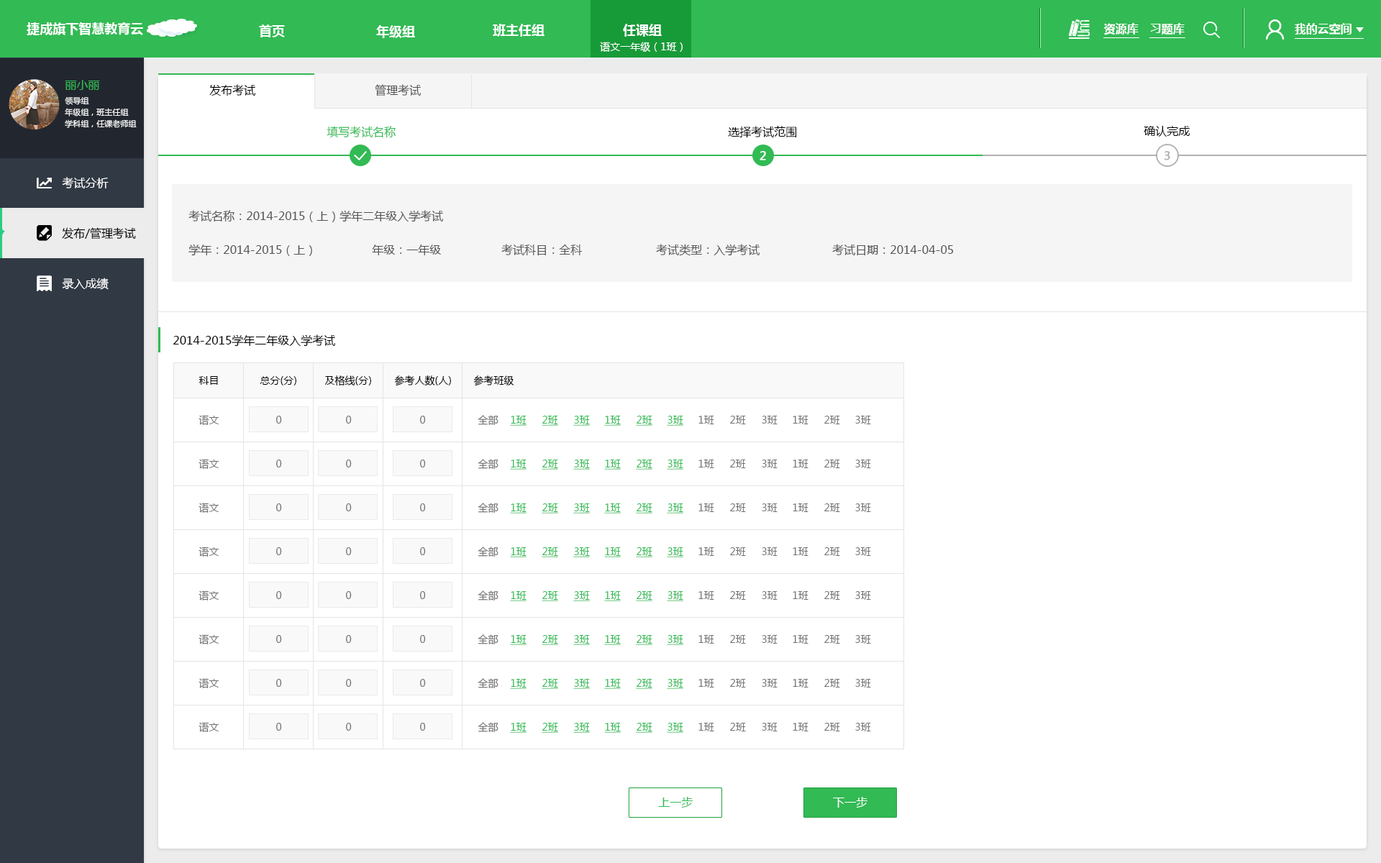
<style>
.page{position:relative;width:1381px;height:863px;background:#ffffff}
.page>*{position:absolute;margin:0}
.t1{font:12.9px "MicrosoftYaHei-Bold";color:#ffffff}
.t2{font:11.5px "MicrosoftYaHei-Bold";color:#ffffff}
.t3{font:10.1px "MicrosoftYaHei";color:#ffffff}
.t4{font:11.5px "MicrosoftYaHei";color:#32ba54}
.t5{font:11.5px "MicrosoftYaHei";color:#000000}
.t6{font:11.5px "MicrosoftYaHei";color:#545454}
.t7{font:7.9px/11.5px "MicrosoftYaHei";color:#ffffff}
.t8{font:11.5px "MicrosoftYaHei";color:#ffffff;font-weight:bold}
.t9{font:11.5px "MicrosoftYaHei";color:#b2b2b2;font-weight:bold}
.t10{font:11.5px "MicrosoftYaHei";color:#ffffff}
.t11{font:11.5px "MicrosoftYaHei";color:#555555}
.t12{font:10.1px "MicrosoftYaHei";color:#000000}
.t13{font:10.1px "MicrosoftYaHei";color:#737373}
.t14{font:10.1px "MicrosoftYaHei";color:#717171}
.t15{font:10.1px "MicrosoftYaHei";color:#32ba54;text-decoration:underline}
.t16{font:11.5px "MicrosoftYaHei";color:#fffefe}
</style>
<div class="page">
<p class="t1" style="left:27px;top:22px;width:116px;height:13px">捷成旗下智慧教育云</p>
<p class="t1" style="left:259px;top:24px;width:26px;height:13px">首页</p>
<p class="t1" style="left:376px;top:25px;width:39px;height:13px">年级组</p>
<p class="t1" style="left:493px;top:24px;width:52px;height:13px">班主任组</p>
<p class="t1" style="left:623px;top:24px;width:39px;height:13px">任课组</p>
<p class="t2" style="left:1104px;top:23px;width:35px;height:12px">资源库</p>
<p class="t2" style="left:1150px;top:23px;width:35px;height:12px">习题库</p>
<p class="t2" style="left:1295px;top:23px;width:57px;height:12px">我的云空间</p>
<p class="t3" style="left:600px;top:42px;width:83px;height:10px">语文一年级（1班）</p>
<p class="t4" style="left:65px;top:80px;width:35px;height:10px">丽小丽</p>
<p class="t5" style="left:209px;top:84px;width:46px;height:12px">发布考试</p>
<p class="t6" style="left:375px;top:84px;width:46px;height:12px">管理考试</p>
<p class="t7" style="left:65px;top:97px;width:72px;height:31px">领导组<br>年级组，班主任组<br>学科组，任课老师组</p>
<p class="t4" style="left:327px;top:126px;width:69px;height:12px">填写考试名称</p>
<p class="t5" style="left:728px;top:126px;width:69px;height:12px">选择考试范围</p>
<p class="t5" style="left:1144px;top:126px;width:47px;height:11px">确认完成</p>
<p class="t8" style="left:760px;top:151px;width:6px;height:9px">2</p>
<p class="t9" style="left:1164px;top:151px;width:6px;height:9px">3</p>
<p class="t10" style="left:62px;top:177px;width:47px;height:11px">考试分析</p>
<p class="t11" style="left:188px;top:210px;width:255px;height:12px">考试名称：2014-2015（上）学年二年级入学考试</p>
<p class="t5" style="left:62px;top:227px;width:74px;height:13px">发布/管理考试</p>
<p class="t11" style="left:188px;top:244px;width:124px;height:12px">学年：2014-2015（上）</p>
<p class="t11" style="left:372px;top:245px;width:70px;height:10px">年级：一年级</p>
<p class="t11" style="left:501px;top:244px;width:81px;height:11px">考试科目：全科</p>
<p class="t11" style="left:656px;top:244px;width:104px;height:12px">考试类型：入学考试</p>
<p class="t11" style="left:832px;top:244px;width:122px;height:11px">考试日期：2014-04-05</p>
<p class="t10" style="left:62px;top:278px;width:47px;height:12px">录入成绩</p>
<p class="t5" style="left:173px;top:335px;width:162px;height:12px">2014-2015学年二年级入学考试</p>
<p class="t12" style="left:199px;top:376px;width:19px;height:9px">科目</p>
<p class="t12" style="left:260px;top:376px;width:36px;height:10px">总分(分)</p>
<p class="t12" style="left:324px;top:376px;width:47px;height:10px">及格线(分)</p>
<p class="t12" style="left:394px;top:376px;width:57px;height:10px">参考人数(人)</p>
<p class="t12" style="left:473px;top:376px;width:41px;height:10px">参考班级</p>
<p class="t13" style="left:199px;top:415px;width:20px;height:10px">语文</p>
<p class="t14" style="left:276px;top:416px;width:6px;height:8px">0</p>
<p class="t14" style="left:346px;top:416px;width:6px;height:8px">0</p>
<p class="t14" style="left:420px;top:416px;width:6px;height:8px">0</p>
<p class="t13" style="left:478px;top:415px;width:21px;height:10px">全部</p>
<p class="t15" style="left:510px;top:416px;width:17px;height:10px">1班</p>
<p class="t15" style="left:542px;top:416px;width:16px;height:10px">2班</p>
<p class="t15" style="left:573px;top:416px;width:17px;height:10px">3班</p>
<p class="t15" style="left:604px;top:416px;width:17px;height:10px">1班</p>
<p class="t15" style="left:636px;top:416px;width:17px;height:10px">2班</p>
<p class="t15" style="left:667px;top:416px;width:16px;height:10px">3班</p>
<p class="t13" style="left:699px;top:416px;width:15px;height:8px">1班</p>
<p class="t13" style="left:730px;top:416px;width:16px;height:8px">2班</p>
<p class="t13" style="left:762px;top:416px;width:16px;height:8px">3班</p>
<p class="t13" style="left:793px;top:416px;width:16px;height:8px">1班</p>
<p class="t13" style="left:824px;top:416px;width:16px;height:8px">2班</p>
<p class="t13" style="left:855px;top:416px;width:16px;height:8px">3班</p>
<p class="t13" style="left:199px;top:459px;width:20px;height:10px">语文</p>
<p class="t14" style="left:276px;top:460px;width:6px;height:8px">0</p>
<p class="t14" style="left:346px;top:460px;width:6px;height:8px">0</p>
<p class="t14" style="left:420px;top:460px;width:6px;height:8px">0</p>
<p class="t13" style="left:478px;top:459px;width:21px;height:10px">全部</p>
<p class="t15" style="left:510px;top:460px;width:17px;height:10px">1班</p>
<p class="t15" style="left:542px;top:460px;width:16px;height:10px">2班</p>
<p class="t15" style="left:573px;top:460px;width:17px;height:10px">3班</p>
<p class="t15" style="left:604px;top:460px;width:17px;height:10px">1班</p>
<p class="t15" style="left:636px;top:460px;width:17px;height:10px">2班</p>
<p class="t15" style="left:667px;top:460px;width:16px;height:10px">3班</p>
<p class="t13" style="left:699px;top:460px;width:15px;height:8px">1班</p>
<p class="t13" style="left:730px;top:460px;width:16px;height:8px">2班</p>
<p class="t13" style="left:762px;top:460px;width:16px;height:8px">3班</p>
<p class="t13" style="left:793px;top:460px;width:16px;height:8px">1班</p>
<p class="t13" style="left:824px;top:460px;width:16px;height:8px">2班</p>
<p class="t13" style="left:855px;top:460px;width:16px;height:8px">3班</p>
<p class="t13" style="left:199px;top:503px;width:20px;height:10px">语文</p>
<p class="t14" style="left:276px;top:504px;width:6px;height:7px">0</p>
<p class="t14" style="left:346px;top:504px;width:6px;height:7px">0</p>
<p class="t14" style="left:420px;top:504px;width:6px;height:7px">0</p>
<p class="t13" style="left:478px;top:503px;width:21px;height:10px">全部</p>
<p class="t15" style="left:510px;top:504px;width:17px;height:10px">1班</p>
<p class="t15" style="left:542px;top:504px;width:16px;height:10px">2班</p>
<p class="t15" style="left:573px;top:504px;width:17px;height:10px">3班</p>
<p class="t15" style="left:604px;top:504px;width:17px;height:10px">1班</p>
<p class="t15" style="left:636px;top:504px;width:17px;height:10px">2班</p>
<p class="t15" style="left:667px;top:504px;width:16px;height:10px">3班</p>
<p class="t13" style="left:699px;top:504px;width:15px;height:8px">1班</p>
<p class="t13" style="left:730px;top:504px;width:16px;height:8px">2班</p>
<p class="t13" style="left:762px;top:504px;width:16px;height:8px">3班</p>
<p class="t13" style="left:793px;top:504px;width:16px;height:8px">1班</p>
<p class="t13" style="left:824px;top:504px;width:16px;height:8px">2班</p>
<p class="t13" style="left:855px;top:504px;width:16px;height:8px">3班</p>
<p class="t13" style="left:199px;top:547px;width:20px;height:10px">语文</p>
<p class="t14" style="left:276px;top:547px;width:6px;height:8px">0</p>
<p class="t14" style="left:346px;top:547px;width:6px;height:8px">0</p>
<p class="t14" style="left:420px;top:547px;width:6px;height:8px">0</p>
<p class="t13" style="left:478px;top:547px;width:21px;height:10px">全部</p>
<p class="t15" style="left:510px;top:547px;width:17px;height:11px">1班</p>
<p class="t15" style="left:542px;top:547px;width:16px;height:11px">2班</p>
<p class="t15" style="left:573px;top:547px;width:17px;height:11px">3班</p>
<p class="t15" style="left:604px;top:547px;width:17px;height:11px">1班</p>
<p class="t15" style="left:636px;top:547px;width:17px;height:11px">2班</p>
<p class="t15" style="left:667px;top:547px;width:16px;height:11px">3班</p>
<p class="t13" style="left:699px;top:547px;width:15px;height:9px">1班</p>
<p class="t13" style="left:730px;top:547px;width:16px;height:9px">2班</p>
<p class="t13" style="left:762px;top:547px;width:16px;height:9px">3班</p>
<p class="t13" style="left:793px;top:547px;width:16px;height:9px">1班</p>
<p class="t13" style="left:824px;top:547px;width:16px;height:9px">2班</p>
<p class="t13" style="left:855px;top:547px;width:16px;height:9px">3班</p>
<p class="t13" style="left:199px;top:591px;width:20px;height:10px">语文</p>
<p class="t14" style="left:276px;top:591px;width:6px;height:8px">0</p>
<p class="t14" style="left:346px;top:591px;width:6px;height:8px">0</p>
<p class="t14" style="left:420px;top:591px;width:6px;height:8px">0</p>
<p class="t13" style="left:478px;top:591px;width:21px;height:10px">全部</p>
<p class="t15" style="left:510px;top:591px;width:17px;height:10px">1班</p>
<p class="t15" style="left:542px;top:591px;width:16px;height:10px">2班</p>
<p class="t15" style="left:573px;top:591px;width:17px;height:10px">3班</p>
<p class="t15" style="left:604px;top:591px;width:17px;height:10px">1班</p>
<p class="t15" style="left:636px;top:591px;width:17px;height:10px">2班</p>
<p class="t15" style="left:667px;top:591px;width:16px;height:10px">3班</p>
<p class="t13" style="left:699px;top:591px;width:15px;height:9px">1班</p>
<p class="t13" style="left:730px;top:591px;width:16px;height:9px">2班</p>
<p class="t13" style="left:762px;top:591px;width:16px;height:9px">3班</p>
<p class="t13" style="left:793px;top:591px;width:16px;height:9px">1班</p>
<p class="t13" style="left:824px;top:591px;width:16px;height:9px">2班</p>
<p class="t13" style="left:855px;top:591px;width:16px;height:9px">3班</p>
<p class="t13" style="left:199px;top:635px;width:20px;height:10px">语文</p>
<p class="t14" style="left:276px;top:635px;width:6px;height:8px">0</p>
<p class="t14" style="left:346px;top:635px;width:6px;height:8px">0</p>
<p class="t14" style="left:420px;top:635px;width:6px;height:8px">0</p>
<p class="t13" style="left:478px;top:635px;width:21px;height:10px">全部</p>
<p class="t15" style="left:510px;top:635px;width:17px;height:10px">1班</p>
<p class="t15" style="left:542px;top:635px;width:16px;height:10px">2班</p>
<p class="t15" style="left:573px;top:635px;width:17px;height:10px">3班</p>
<p class="t15" style="left:604px;top:635px;width:17px;height:10px">1班</p>
<p class="t15" style="left:636px;top:635px;width:17px;height:10px">2班</p>
<p class="t15" style="left:667px;top:635px;width:16px;height:10px">3班</p>
<p class="t13" style="left:699px;top:635px;width:15px;height:9px">1班</p>
<p class="t13" style="left:730px;top:635px;width:16px;height:9px">2班</p>
<p class="t13" style="left:762px;top:635px;width:16px;height:9px">3班</p>
<p class="t13" style="left:793px;top:635px;width:16px;height:9px">1班</p>
<p class="t13" style="left:824px;top:635px;width:16px;height:9px">2班</p>
<p class="t13" style="left:855px;top:635px;width:16px;height:9px">3班</p>
<p class="t13" style="left:199px;top:678px;width:20px;height:10px">语文</p>
<p class="t14" style="left:276px;top:679px;width:6px;height:8px">0</p>
<p class="t14" style="left:346px;top:679px;width:6px;height:8px">0</p>
<p class="t14" style="left:420px;top:679px;width:6px;height:8px">0</p>
<p class="t13" style="left:478px;top:678px;width:21px;height:10px">全部</p>
<p class="t15" style="left:510px;top:679px;width:17px;height:10px">1班</p>
<p class="t15" style="left:542px;top:679px;width:16px;height:10px">2班</p>
<p class="t15" style="left:573px;top:679px;width:17px;height:10px">3班</p>
<p class="t15" style="left:604px;top:679px;width:17px;height:10px">1班</p>
<p class="t15" style="left:636px;top:679px;width:17px;height:10px">2班</p>
<p class="t15" style="left:667px;top:679px;width:16px;height:10px">3班</p>
<p class="t13" style="left:699px;top:679px;width:15px;height:9px">1班</p>
<p class="t13" style="left:730px;top:679px;width:16px;height:9px">2班</p>
<p class="t13" style="left:762px;top:679px;width:16px;height:9px">3班</p>
<p class="t13" style="left:793px;top:679px;width:16px;height:9px">1班</p>
<p class="t13" style="left:824px;top:679px;width:16px;height:9px">2班</p>
<p class="t13" style="left:855px;top:679px;width:16px;height:9px">3班</p>
<p class="t13" style="left:199px;top:722px;width:20px;height:10px">语文</p>
<p class="t14" style="left:276px;top:723px;width:6px;height:8px">0</p>
<p class="t14" style="left:346px;top:723px;width:6px;height:8px">0</p>
<p class="t14" style="left:420px;top:723px;width:6px;height:8px">0</p>
<p class="t13" style="left:478px;top:722px;width:21px;height:10px">全部</p>
<p class="t15" style="left:510px;top:723px;width:17px;height:10px">1班</p>
<p class="t15" style="left:542px;top:723px;width:16px;height:10px">2班</p>
<p class="t15" style="left:573px;top:723px;width:17px;height:10px">3班</p>
<p class="t15" style="left:604px;top:723px;width:17px;height:10px">1班</p>
<p class="t15" style="left:636px;top:723px;width:17px;height:10px">2班</p>
<p class="t15" style="left:667px;top:723px;width:16px;height:10px">3班</p>
<p class="t13" style="left:699px;top:723px;width:15px;height:9px">1班</p>
<p class="t13" style="left:730px;top:723px;width:16px;height:9px">2班</p>
<p class="t13" style="left:762px;top:723px;width:16px;height:9px">3班</p>
<p class="t13" style="left:793px;top:723px;width:16px;height:9px">1班</p>
<p class="t13" style="left:824px;top:723px;width:16px;height:9px">2班</p>
<p class="t13" style="left:855px;top:723px;width:16px;height:9px">3班</p>
<p class="t4" style="left:658px;top:797px;width:35px;height:11px">上一步</p>
<p class="t16" style="left:833px;top:797px;width:35px;height:11px">下一步</p>
</div>
